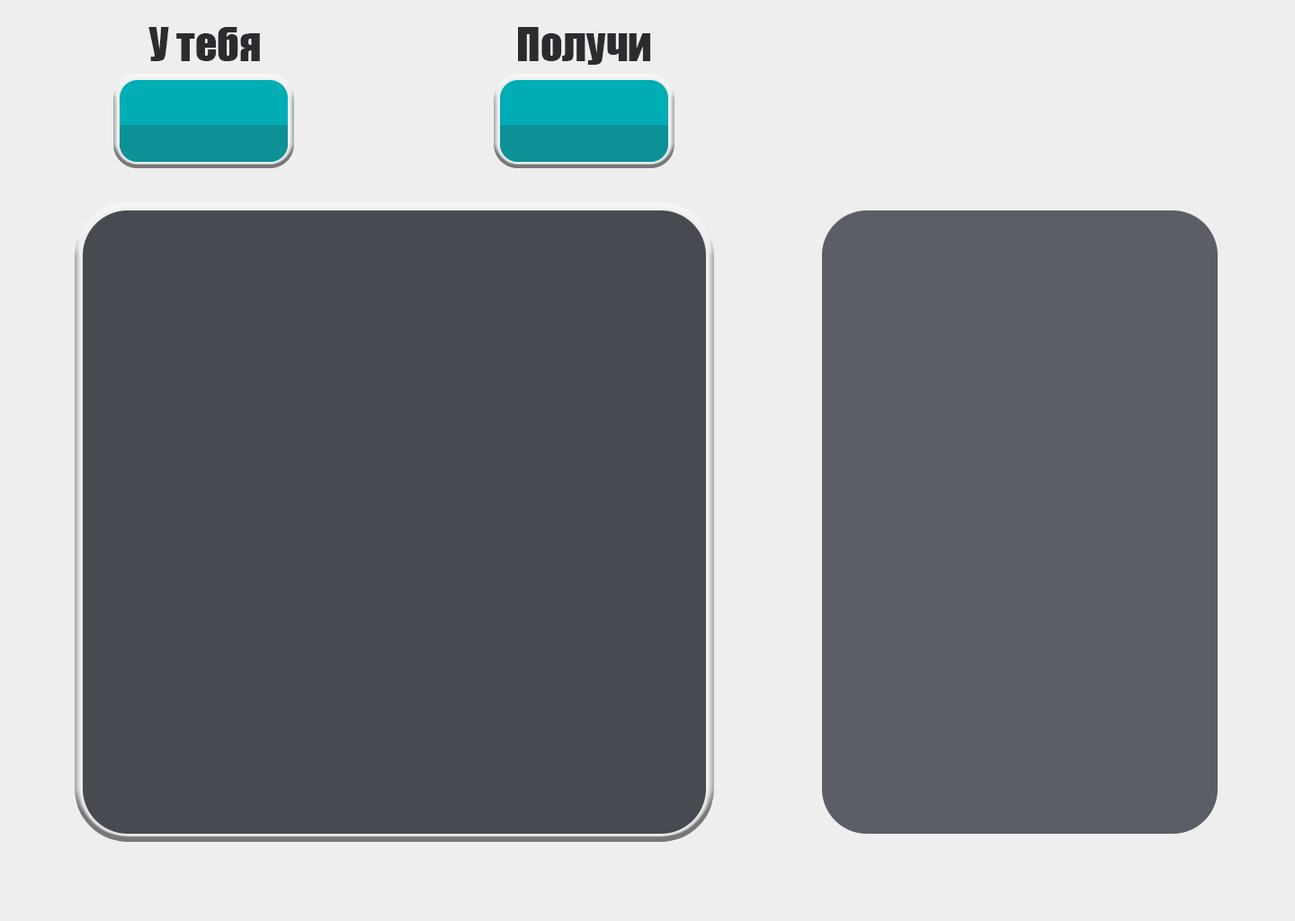
<style>
.page{position:relative;width:1295px;height:921px;background:#eeeeee}
.page>*{position:absolute;margin:0}
.t1{font:43.2px "Impact";color:#2a2c30}
</style>
<div class="page">
<p class="t1" style="left:148px;top:27px;width:112px;height:34px">У тебя</p>
<p class="t1" style="left:518px;top:27px;width:133px;height:38px">Получи</p>
</div>
